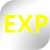
<style>
.page{position:relative;width:50px;height:50px}
.page>*{position:absolute;margin:0}
.t1{font:25px "OpenSans-Bold";color:#fcff00}
</style>
<div class="page">
<p class="t1" style="left:5px;top:15px;width:43px;height:18px">EXP</p>
</div>
